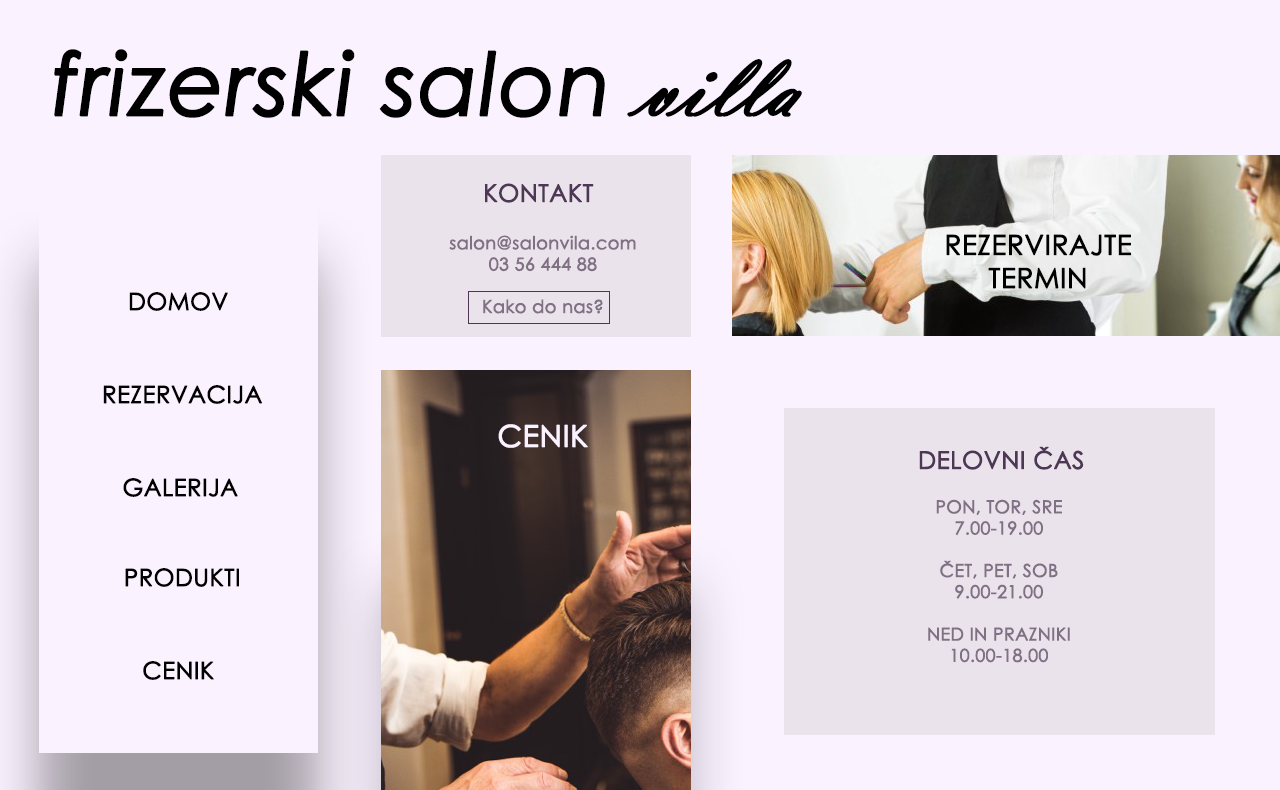
<style>
.page{position:relative;width:1280px;height:790px;background:#fbf2ff}
.page>*{position:absolute;margin:0}
.t1{font:86.4px "CenturyGothic-Italic";color:#000000;font-weight:bold}
.t2{font:94.7px "VladimirScript";color:#000000;font-weight:bold}
.t3{font:24.2px "CenturyGothic";color:#4e3655;font-weight:bold}
.t4{font:17.7px "CenturyGothic";color:#807084;font-weight:bold}
.t5{font:27.6px "CenturyGothic";color:#010001;font-weight:bold}
.t6{font:23.8px "CenturyGothic";color:#000000;font-weight:bold}
.t7{font:30px "CenturyGothic";color:#fbf2ff;font-weight:bold}
</style>
<div class="page">
<p class="t1" style="left:54px;top:49px;width:748px;height:69px">frizerski salon <span class="t2">villa</span></p>
<p class="t3" style="left:485px;top:183px;width:109px;height:20px">KONTAKT</p>
<p class="t4" style="left:449px;top:235px;width:187px;height:79px;text-align:center">salon@salonvila.com<br>03 56 444 88<br><br>Kako do nas?</p>
<p class="t5" style="left:946px;top:234px;width:185px;height:55px;text-align:center">REZERVIRAJTE<br>TERMIN</p>
<p class="t6" style="left:129px;top:292px;width:99px;height:19px">DOMOV</p>
<p class="t6" style="left:103px;top:385px;width:159px;height:19px">REZERVACIJA</p>
<p class="t7" style="left:498px;top:424px;width:90px;height:24px">CENIK</p>
<p class="t3" style="left:919px;top:446px;width:165px;height:24px">DELOVNI ČAS</p>
<p class="t6" style="left:123px;top:478px;width:115px;height:19px">GALERIJA</p>
<p class="t4" style="left:928px;top:499px;width:142px;height:164px;text-align:center">PON, TOR, SRE<br>7.00-19.00<br><br>ČET, PET, SOB<br>9.00-21.00<br><br>NED IN PRAZNIKI<br>10.00-18.00</p>
<p class="t6" style="left:125px;top:568px;width:114px;height:19px">PRODUKTI</p>
<p class="t6" style="left:143px;top:661px;width:71px;height:19px">CENIK</p>
</div>
